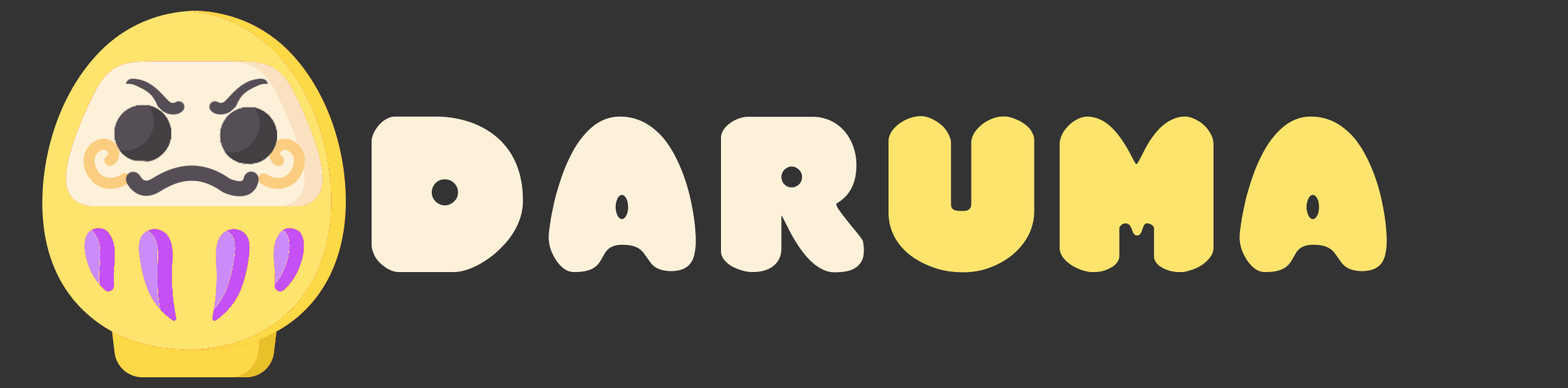
<style>
.page{position:relative;width:1568px;height:388px;background:#333333}
.page>*{position:absolute;margin:0}
.t1{font:238.7px "Overmuch";letter-spacing:0.075em;color:#fef1da}
.t2{font:238.7px "Overmuch";letter-spacing:0.075em;color:#fde46d}
</style>
<div class="page">
<p class="t1" style="left:372px;top:116px;width:1015px;height:157px">DAR<span class="t2">UMA</span></p>
</div>
